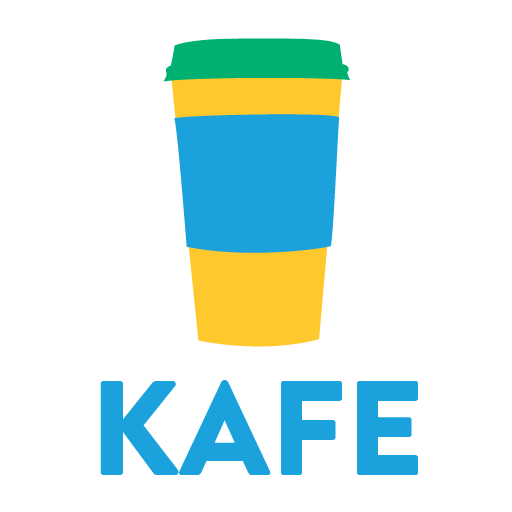
<style>
.page{position:relative;width:512px;height:512px;background:#ffffff}
.page>*{position:absolute;margin:0}
.t1{font:135px "BrandonGrotesque-Black";color:#1ba2dd;text-transform:uppercase}
</style>
<div class="page">
<p class="t1" style="left:100px;top:380px;width:318px;height:95px">kafe</p>
</div>
